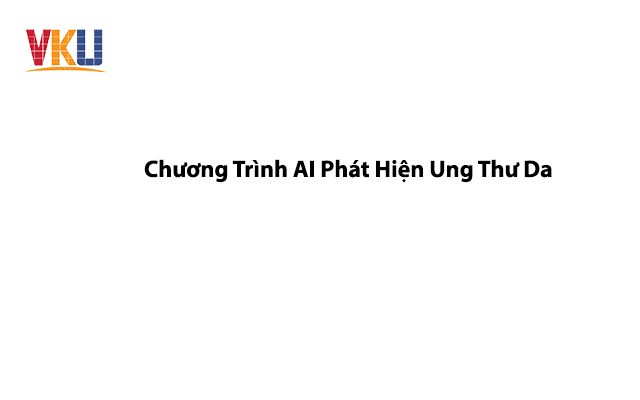
<style>
.page{position:relative;width:640px;height:400px;background:#ffffff}
.page>*{position:absolute;margin:0}
.t1{font:24px "MyriadPro-Bold";color:#000000}
</style>
<div class="page">
<p class="t1" style="left:144px;top:159px;width:408px;height:24px">Chương Trình AI Phát Hiện Ung Thư Da</p>
</div>
